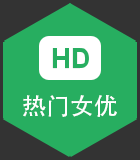
<style>
.page{position:relative;width:140px;height:160px;background:#27ae60}
.page>*{position:absolute;margin:0}
.t1{font:24px "AdobeHeitiStd-Regular";color:#ffffff}
</style>
<div class="page">
<p class="t1" style="left:23px;top:95px;width:94px;height:22px">热门女优</p>
</div>
